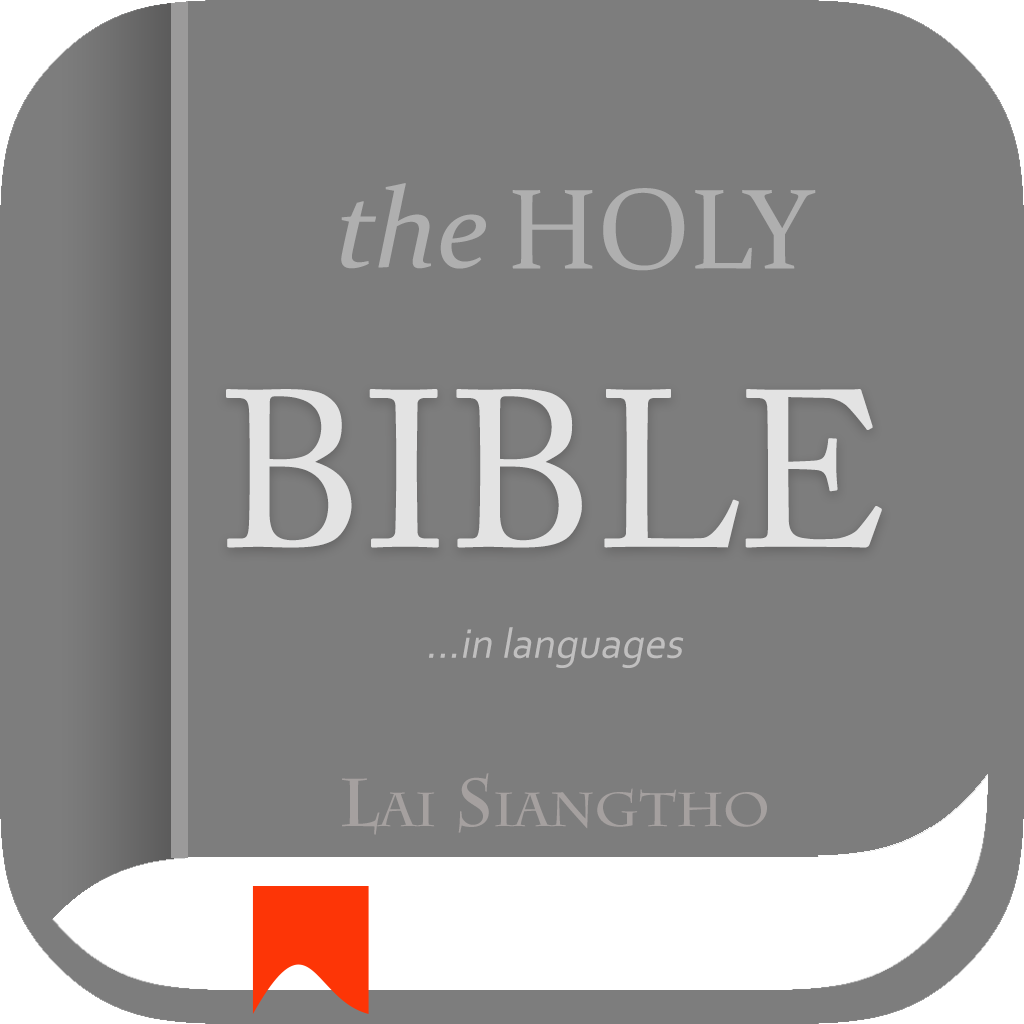
<style>
.page{position:relative;width:1024px;height:1024px;background:#7d7d7d}
.page>*{position:absolute;margin:0}
.t1{font:114.4px "Constantia-Italic";color:#afafaf}
.t2{font:114.4px "Constantia";color:#afafaf;text-transform:uppercase}
.t3{font:221.4px "ACaslonPro-Regular";color:#f8f6f6;text-transform:uppercase}
.t4{font:43px "Corbel";color:#c0bfbf;font-style:italic}
.t5{font:67.7px "CharlemagneStd-Bold";color:#b7b1af;font-variant:small-caps;scale:1.04 1}
</style>
<div class="page">
<p class="t1" style="left:341px;top:183px;width:145px;height:86px">the</p>
<p class="t2" style="left:512px;top:188px;width:304px;height:83px">Holy</p>
<p class="t3" style="left:226px;top:389px;width:656px;height:159px">Bible</p>
<p class="t4" style="left:429px;top:627px;width:255px;height:41px">...in languages</p>
<p class="t5" style="left:342px;top:773px;width:425px;height:62px;opacity:0.66">Lai Siangtho</p>
</div>
